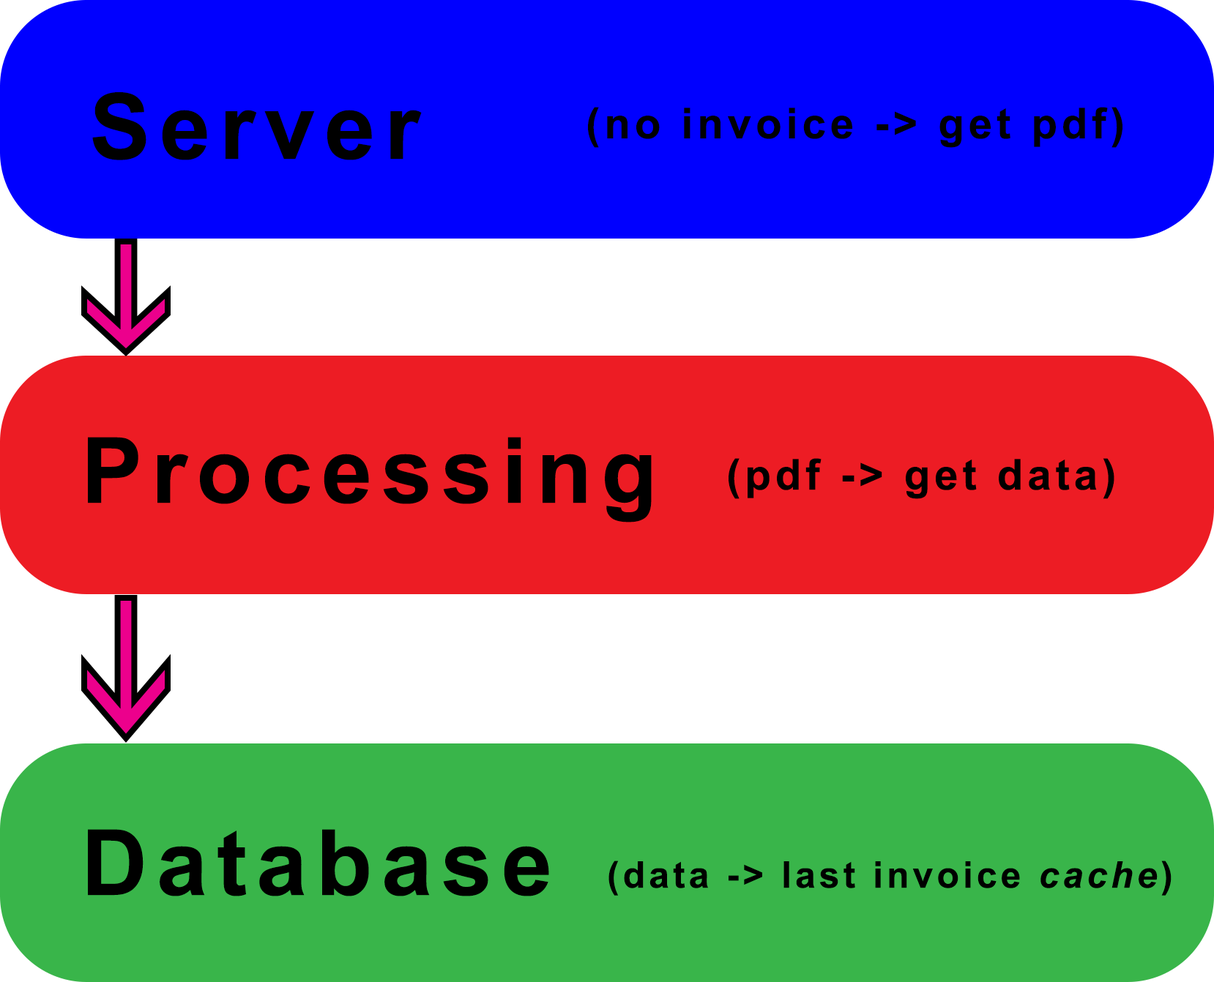
<style>
.page{position:relative;width:1214px;height:982px;background:#ffffff}
.page>*{position:absolute;margin:0}
.t1{font:91.5px "Arial-BoldMT";letter-spacing:0.1em;color:#000000}
.t2{font:42.7px "Arial-BoldMT";letter-spacing:0.1em;color:#000000}
.t3{font:36.6px "Arial-BoldMT";letter-spacing:0.1em;color:#000000}
.t4{font:36.6px "Arial-BoldItalicMT";letter-spacing:0.1em;color:#000000}
</style>
<div class="page">
<p class="t1" style="left:92px;top:92px;width:330px;height:68px">Server</p>
<p class="t2" style="left:588px;top:107px;width:534px;height:41px">(no invoice -&gt; get pdf)</p>
<p class="t1" style="left:88px;top:437px;width:564px;height:86px">Processing</p>
<p class="t2" style="left:728px;top:458px;width:386px;height:41px">(pdf -&gt; get data)</p>
<p class="t1" style="left:88px;top:829px;width:461px;height:68px">Database</p>
<p class="t3" style="left:608px;top:861px;width:563px;height:35px">(data -&gt; last invoice <span class="t4">cache</span>)</p>
</div>
